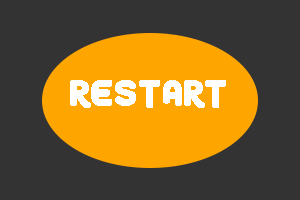
<style>
.page{position:relative;width:300px;height:200px;background:#333333}
.page>*{position:absolute;margin:0}
.t1{font:37.5px "RoundyRainbows";color:#ffffff}
</style>
<div class="page">
<p class="t1" style="left:70px;top:80px;width:156px;height:28px">Restart</p>
</div>
